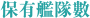
<style>
.page{position:relative;width:90px;height:18px;background:#ffffff}
.page>*{position:absolute;margin:0}
.t1{font:18px "RyuminPr6N-ExBold";color:#26a2a2}
</style>
<div class="page">
<p class="t1" style="left:0px;top:0px;width:90px;height:18px">保有艦隊數</p>
</div>
